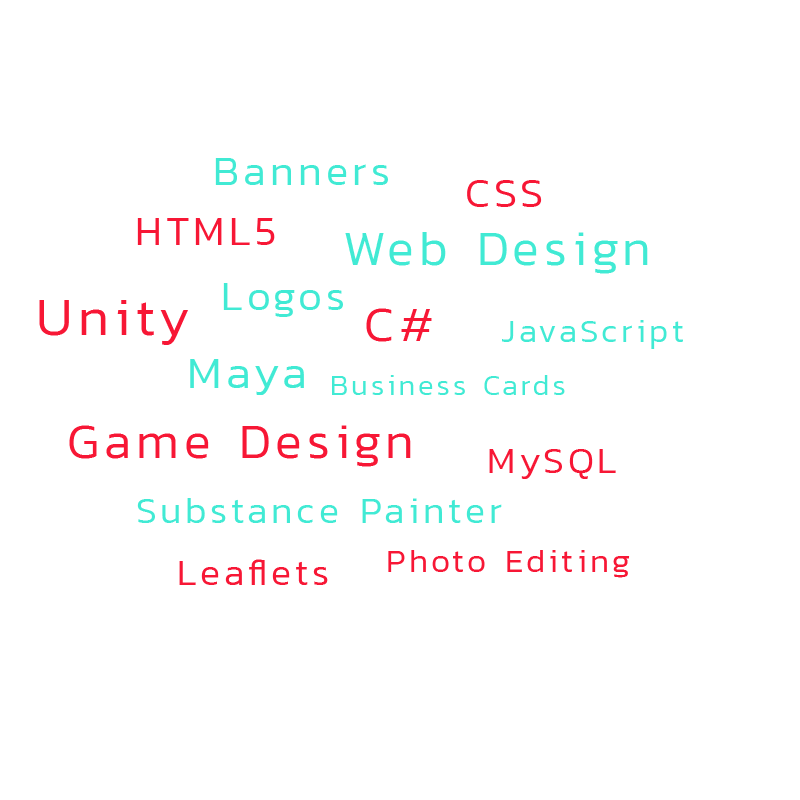
<style>
.page{position:relative;width:800px;height:800px;background:#ffffff}
.page>*{position:absolute;margin:0}
.t1{font:41.7px "Kanit-Light";letter-spacing:0.1em;color:#41ead4}
.t2{font:41.7px "Kanit-Light";letter-spacing:0.1em;color:#f71735}
.t3{font:50px "Kanit-Light";letter-spacing:0.1em;color:#41ead4}
.t4{font:54.2px "Kanit-Light";letter-spacing:0.1em;color:#f71735}
.t5{font:50px "Kanit-Light";letter-spacing:0.1em;color:#f71735}
.t6{font:33.3px "Kanit-Light";letter-spacing:0.1em;color:#41ead4}
.t7{font:45.8px "Kanit-Light";letter-spacing:0.1em;color:#41ead4}
.t8{font:29.2px "Kanit-Light";letter-spacing:0.1em;color:#41ead4}
.t9{font:37.5px "Kanit-Light";letter-spacing:0.1em;color:#f71735}
.t10{font:37.5px "Kanit-Light";letter-spacing:0.1em;color:#41ead4}
.t11{font:33.3px "Kanit-Light";letter-spacing:0.1em;color:#f71735}
</style>
<div class="page">
<p class="t1" style="left:215px;top:158px;width:173px;height:27px">Banners</p>
<p class="t2" style="left:467px;top:180px;width:75px;height:27px">CSS</p>
<p class="t2" style="left:137px;top:218px;width:138px;height:27px">HTML5</p>
<p class="t3" style="left:345px;top:232px;width:303px;height:42px">Web Design</p>
<p class="t1" style="left:223px;top:283px;width:120px;height:34px">Logos</p>
<p class="t4" style="left:39px;top:300px;width:149px;height:45px">Unity</p>
<p class="t5" style="left:366px;top:308px;width:66px;height:34px">C#</p>
<p class="t6" style="left:502px;top:320px;width:181px;height:29px">JavaScript</p>
<p class="t7" style="left:190px;top:359px;width:114px;height:36px">Maya</p>
<p class="t8" style="left:332px;top:375px;width:233px;height:20px">Business Cards</p>
<p class="t5" style="left:69px;top:425px;width:342px;height:42px">Game Design</p>
<p class="t9" style="left:489px;top:449px;width:127px;height:30px">MySQL</p>
<p class="t10" style="left:137px;top:498px;width:365px;height:25px">Substance Painter</p>
<p class="t11" style="left:388px;top:550px;width:242px;height:28px">Photo Editing</p>
<p class="t9" style="left:179px;top:559px;width:149px;height:26px">Leaflets</p>
</div>
